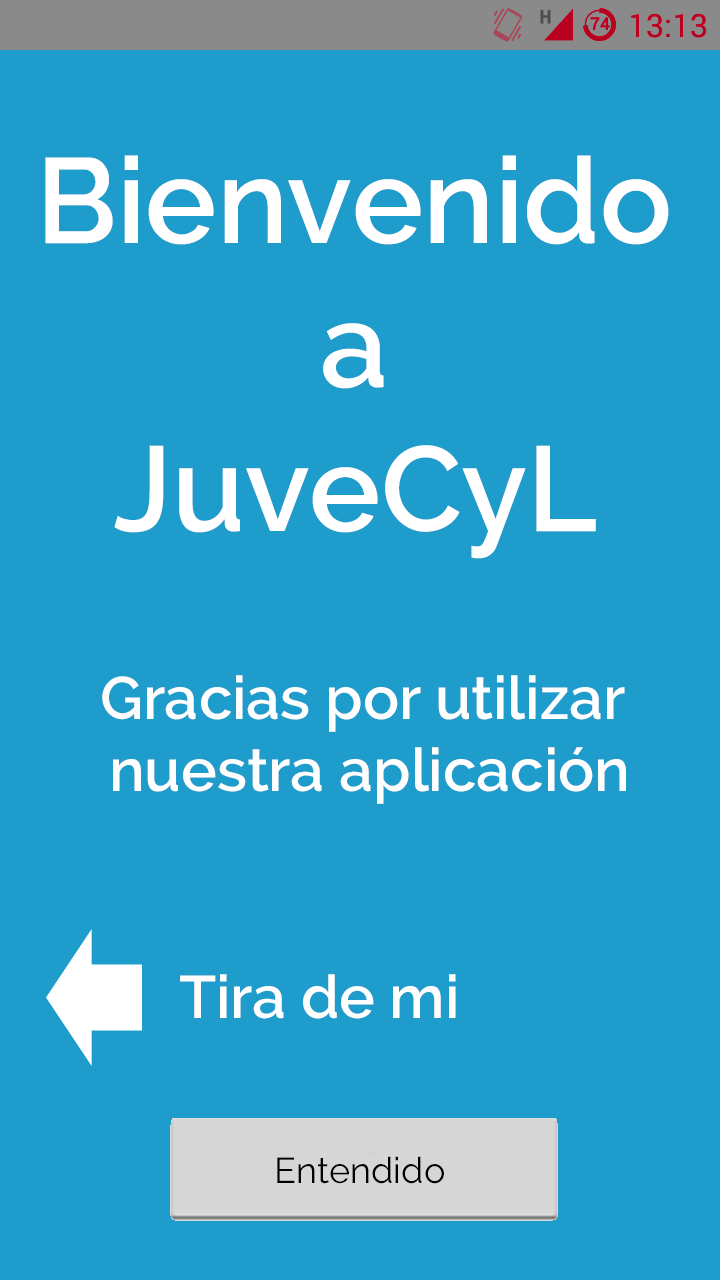
<style>
.page{position:relative;width:720px;height:1280px;background:#1e9ccb}
.page>*{position:absolute;margin:0}
.t1{font:120px "Raleway-SemiBold";color:#ffffff}
.t2{font:60px "Raleway-SemiBold";color:#ffffff}
.t3{font:36px "Raleway-Regular";color:#000000}
</style>
<div class="page">
<p class="t1" style="left:45px;top:155px;width:624px;height:404px;text-align:center">Bienvenido<br> a <br>JuveCyL</p>
<p class="t2" style="left:102px;top:675px;width:524px;height:129px;text-align:center">Gracias por utilizar <br>nuestra aplicación</p>
<p class="t2" style="left:180px;top:974px;width:276px;height:45px">Tira de mi</p>
<p class="t3" style="left:277px;top:1156px;width:167px;height:28px">Entendido</p>
</div>
